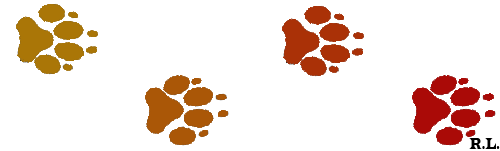
<style>
.page{position:relative;width:500px;height:151px;background:#ffffff}
.page>*{position:absolute;margin:0}
.t1{font:15.9px "LatinWide";color:#000000;scale:0.52 1}
</style>
<div class="page">
<p class="t1" style="left:469px;top:138px;width:31px;height:11px">R.L.</p>
</div>
